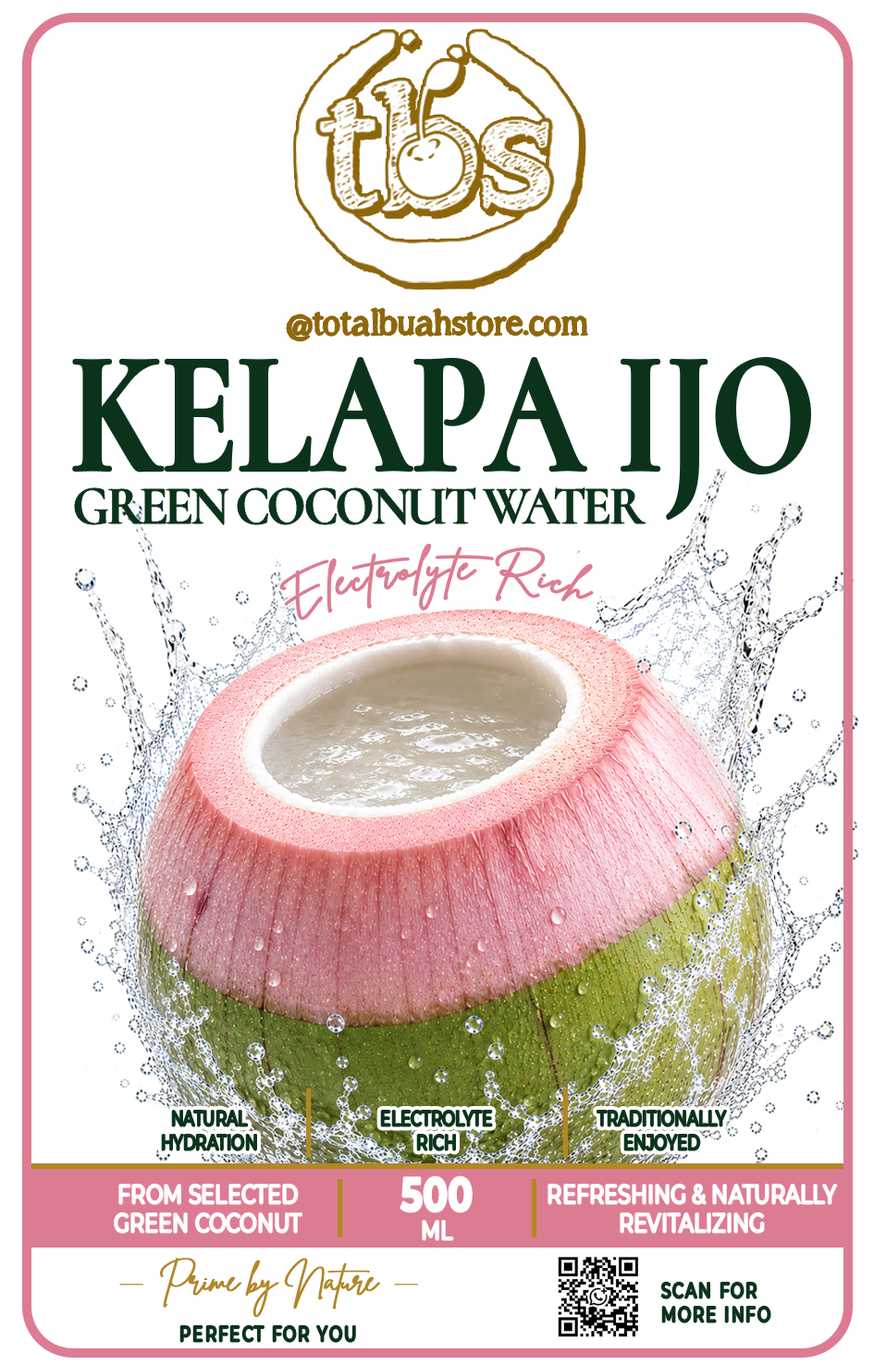
<style>
.page{position:relative;width:874px;height:1365px;background:#ffffff}
.page>*{position:absolute;margin:0}
.t1{font:43.5px "ASongforJennifer";color:#8e660c}
.t2{font:175.2px "Cormorant-Bold";color:#0b321a;scale:0.79 1}
.t3{font:175.2px "CormorantInfant-Bold";color:#0b321a;scale:0.79 1}
.t4{font:55px "Cormorant-Bold";letter-spacing:-0.06em;color:#0b321a;scale:0.95 1}
.t5{font:34.9px "BrittanySignatureRegular";letter-spacing:0.02em;color:#dc7c93;font-weight:bold;scale:1.25 1}
.t6{font:20.9px/23.5px "Montserrat-Regular";color:#0b331b;font-weight:bold;scale:0.72 1}
.t7{font:47.1px/28.8px "Montserrat-Bold";color:#ffffff;font-weight:bold;scale:0.76 1}
.t8{font:26.2px/28.8px "Montserrat-Regular";color:#ffffff;font-weight:bold;scale:0.76 1}
.t9{font:30.8px/7.8px "BrittanySignatureRegular";letter-spacing:-0.06em;color:#b28725;font-weight:bold;scale:1.19 1}
.t10{font:20.9px/23.5px "Montserrat-Regular";letter-spacing:0.12em;color:#0b331b;font-weight:bold;scale:0.72 1}
.t11{font:20.9px "Montserrat-Regular";letter-spacing:0.12em;color:#0b331b;font-weight:bold;scale:0.72 1}
</style>
<div class="page">
<p class="t1" style="left:287px;top:308px;width:301px;height:33px">@totalbuahstore.com</p>
<p class="t2" style="left:74px;top:359px;width:735px;height:160px">KELAPA <span class="t3">IJO</span></p>
<p class="t4" style="left:75px;top:487px;width:570px;height:38px">GREEN COCONUT WATER</p>
<p class="t5" style="left:280px;top:544px;width:313px;height:75px;rotate:-2deg">Electrolyte Rich</p>
<p class="t6" style="left:381px;top:1110px;width:111px;height:40px;text-align:center">ELECTROLYTE<br>RICH</p>
<p class="t6" style="left:597px;top:1110px;width:129px;height:40px;text-align:center">TRADITIONALLY<br>ENJOYED</p>
<p class="t6" style="left:162px;top:1110px;width:94px;height:40px;text-align:center">NATURAL<br>HYDRATION</p>
<p class="t7" style="left:400px;top:1176px;width:72px;height:64px;text-align:center">500<br><span class="t8">ML</span></p>
<p class="t8" style="left:115px;top:1183px;width:186px;height:50px;text-align:center">FROM SELECTED<br>GREEN COCONUT</p>
<p class="t8" style="left:548px;top:1183px;width:289px;height:50px;text-align:center">REFRESHING &amp; NATURALLY<br>REVITALIZING</p>
<p class="t9" style="left:160px;top:1257px;width:220px;height:60px;text-align:center">Prime by Nature</p>
<p class="t10" style="left:661px;top:1282px;width:109px;height:40px">SCAN FOR<br>MORE INFO</p>
<p class="t11" style="left:180px;top:1325px;width:175px;height:17px">PERFECT FOR YOU</p>
</div>
